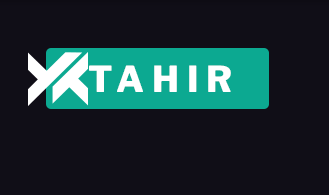
<style>
.page{position:relative;width:329px;height:195px;background:#100e17}
.page>*{position:absolute;margin:0}
.t1{font:35.6px "LibreFranklin-ExtraBold";letter-spacing:0.22em;color:#ffffff;text-transform:uppercase}
</style>
<div class="page">
<p class="t1" style="left:89px;top:65px;width:142px;height:27px">Tahir</p>
</div>
